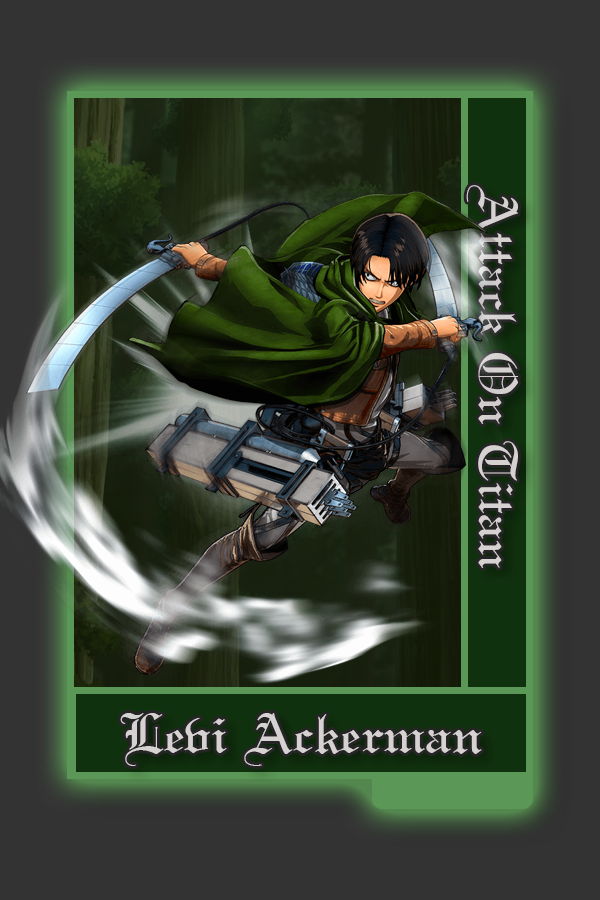
<style>
.page{position:relative;width:600px;height:900px;background:#333333}
.page>*{position:absolute;margin:0}
.t1{font:58.3px "Linotext";color:#d7d3d3}
.t2{font:60.6px "Linotext";color:#d7d3d3}
</style>
<div class="page">
<p class="t1" style="left:466px;top:185px;width:52px;height:383px;rotate:90deg">Attack On Titan</p>
<p class="t2" style="left:120px;top:713px;width:362px;height:53px">Levi Ackerman</p>
</div>
